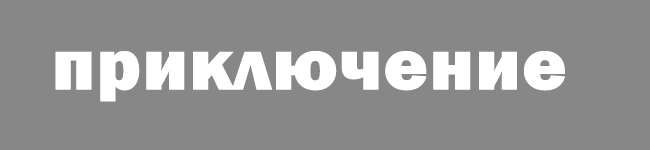
<style>
.page{position:relative;width:650px;height:150px;background:#878787}
.page>*{position:absolute;margin:0}
.t1{font:75px "FranklinGothic-Heavy";color:#ffffff;font-weight:bold}
</style>
<div class="page">
<p class="t1" style="left:55px;top:51px;width:510px;height:51px">приключение</p>
</div>
